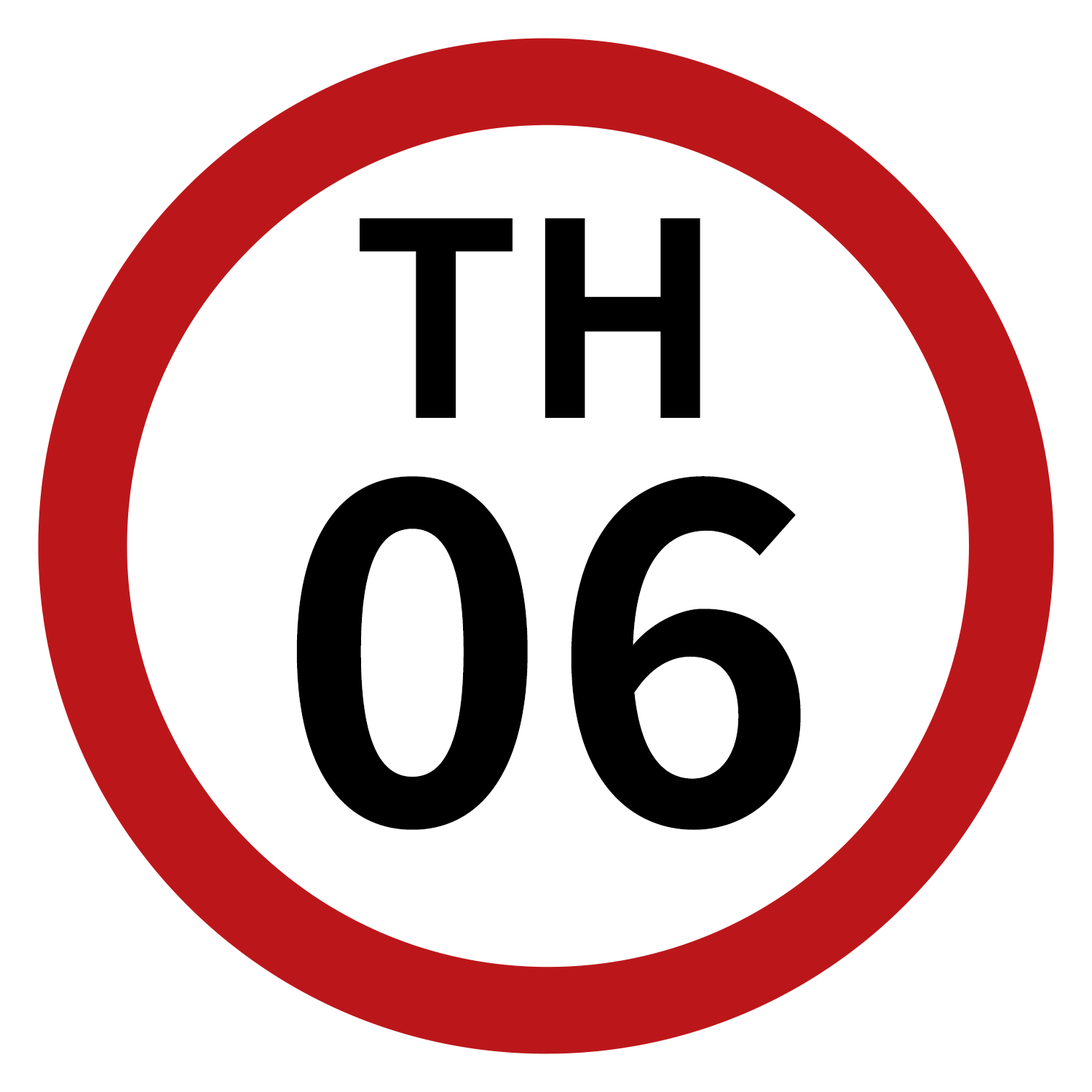
<style>
.page{position:relative;width:1092px;height:1092px;background:#ffffff}
.page>*{position:absolute;margin:0}
.t1{font:269.8px "NotoSansJP-Bold";color:#000000}
.t2{font:460.5px "NotoSansJP-Bold";color:#000000}
</style>
<div class="page">
<p class="t1" style="left:360px;top:218px;width:340px;height:200px">TH</p>
<p class="t2" style="left:296px;top:476px;width:505px;height:354px">06</p>
</div>
